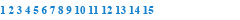
<style>
.page{position:relative;width:240px;height:20px;background:#ffffff}
.page>*{position:absolute;margin:0}
.t1{font:11px "TimesNewRomanPS-BoldMT";color:#1681ce}
</style>
<div class="page">
<p class="t1" style="left:0px;top:6px;width:154px;height:8px">1 2 3 4 5 6 7 8 9 10 11 12 13 14 15</p>
</div>
